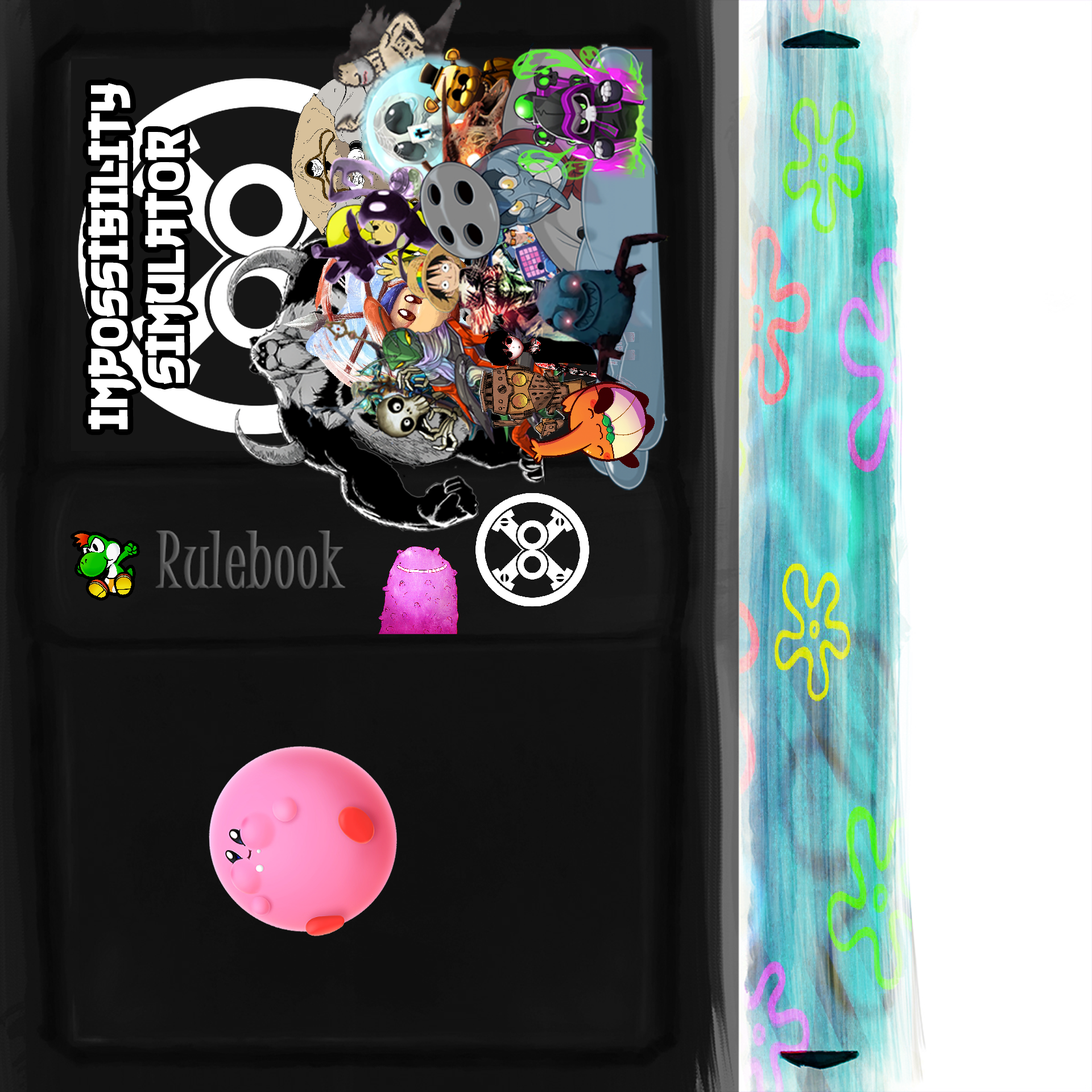
<style>
.page{position:relative;width:1092px;height:1092px}
.page>*{position:absolute;margin:0}
.t1{font:56.9px/56.9px "NukuNuku";color:#ffffff}
</style>
<div class="page">
<p class="t1" style="left:88px;top:83px;width:105px;height:346px;text-align:center;rotate:-90deg">Impossibility <br>Simulator</p>
</div>
